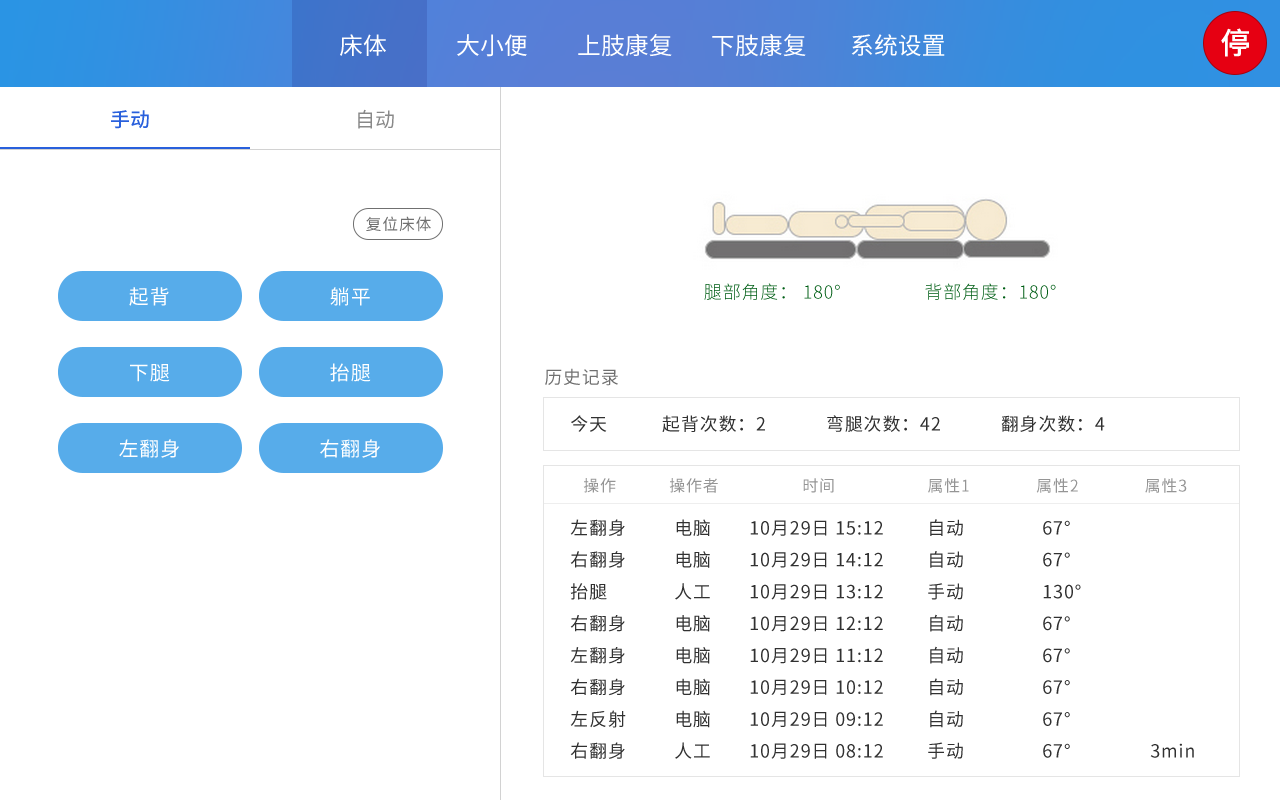
<style>
.page{position:relative;width:1280px;height:800px;background:#ffffff}
.page>*{position:absolute;margin:0}
.t1{font:29.9px "SourceHanSansCN-Medium";color:#ffffff}
.t2{font:23.9px "SourceHanSansCN-Regular";color:#ffffff}
.t3{font:19.9px "SourceHanSansCN-Medium";color:#2960dc}
.t4{font:19.9px "SourceHanSansCN-Regular";color:#898989}
.t5{font:15.9px "SourceHanSansCN-Regular";letter-spacing:0.05em;color:#707070}
.t6{font:19.9px "SourceHanSansCN-Regular";letter-spacing:0.05em;color:#ffffff}
.t7{font:17.9px "SourceHanSansCN-Light";letter-spacing:0.05em;color:#005e15}
.t8{font:17.9px "SourceHanSansCN-Regular";letter-spacing:0.05em;color:#707070}
.t9{font:17.9px "SourceHanSansCN-Regular";letter-spacing:0.05em;color:#313131}
.t10{font:15.9px "SourceHanSansCN-Regular";letter-spacing:0.05em;color:#959595}
.t11{font:17.9px/31.9px "SourceHanSansCN-Regular";letter-spacing:0.05em;color:#313131}
</style>
<div class="page">
<p class="t1" style="left:1221px;top:28px;width:28px;height:29px">停</p>
<p class="t2" style="left:340px;top:34px;width:46px;height:22px">床体</p>
<p class="t2" style="left:457px;top:34px;width:70px;height:23px">大小便</p>
<p class="t2" style="left:578px;top:34px;width:94px;height:23px">上肢康复</p>
<p class="t2" style="left:712px;top:34px;width:94px;height:23px">下肢康复</p>
<p class="t2" style="left:851px;top:34px;width:94px;height:22px">系统设置</p>
<p class="t3" style="left:111px;top:110px;width:38px;height:19px">手动</p>
<p class="t4" style="left:358px;top:109px;width:36px;height:20px">自动</p>
<p class="t5" style="left:366px;top:216px;width:65px;height:16px">复位床体</p>
<p class="t6" style="left:129px;top:287px;width:40px;height:19px">起背</p>
<p class="t6" style="left:330px;top:287px;width:40px;height:19px">躺平</p>
<p class="t7" style="left:704px;top:283px;width:352px;height:17px">腿部角度： 180°                 背部角度：180°</p>
<p class="t6" style="left:130px;top:364px;width:40px;height:18px">下腿</p>
<p class="t6" style="left:330px;top:363px;width:41px;height:19px">抬腿</p>
<p class="t8" style="left:545px;top:368px;width:73px;height:18px">历史记录</p>
<p class="t9" style="left:571px;top:415px;width:534px;height:17px">今天           起背次数：2            弯腿次数：42            翻身次数：4</p>
<p class="t6" style="left:119px;top:439px;width:60px;height:19px">左翻身</p>
<p class="t6" style="left:320px;top:439px;width:60px;height:19px">右翻身</p>
<p class="t10" style="left:583px;top:478px;width:604px;height:15px">操作            操作者                   时间                     属性1               属性2               属性3</p>
<p class="t11" style="left:570px;top:519px;width:56px;height:240px">左翻身<br>右翻身<br>抬腿<br>右翻身<br>左翻身<br>右翻身<br>左反射<br>右翻身</p>
<p class="t11" style="left:675px;top:519px;width:35px;height:240px">电脑<br>电脑<br>人工<br>电脑<br>电脑<br>电脑<br>电脑<br>人工</p>
<p class="t11" style="left:750px;top:520px;width:133px;height:239px">10月29日 15:12<br>10月29日 14:12<br>10月29日 13:12<br>10月29日 12:12<br>10月29日 11:12<br>10月29日 10:12<br>10月29日 09:12<br>10月29日 08:12</p>
<p class="t11" style="left:928px;top:519px;width:35px;height:240px">自动<br>自动<br>手动<br>自动<br>自动<br>自动<br>自动<br>手动</p>
<p class="t11" style="left:1043px;top:520px;width:38px;height:238px">67°<br>67°<br>130°<br>67°<br>67°<br>67°<br>67°<br>67°</p>
<p class="t9" style="left:1150px;top:743px;width:44px;height:15px">3min</p>
</div>
